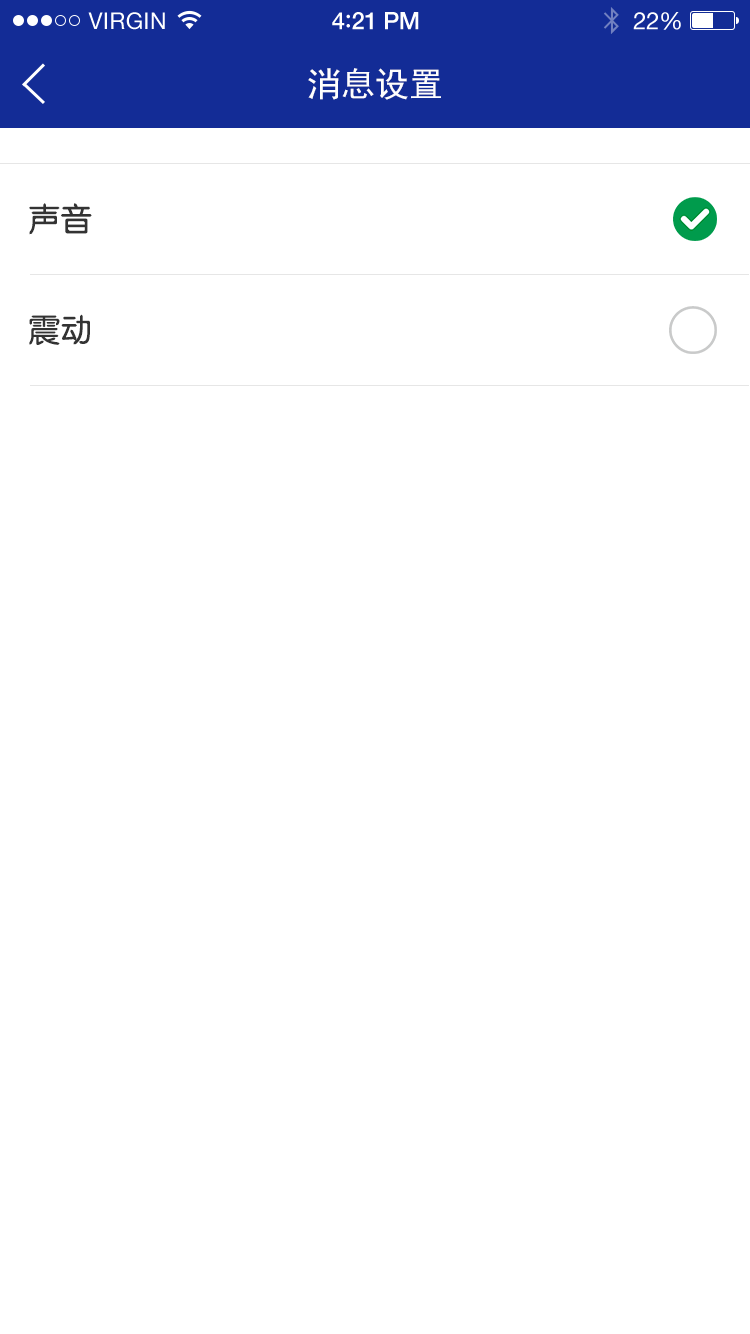
<style>
.page{position:relative;width:750px;height:1334px;background:#ffffff}
.page>*{position:absolute;margin:0}
.t1{font:34px "SimHei";color:#fefefe}
.t2{font:32px/111px "FZY3JW--GB1-0";color:#333333}
</style>
<div class="page">
<p class="t1" style="left:308px;top:68px;width:133px;height:32px">消息设置</p>
<p class="t2" style="left:29px;top:203px;width:63px;height:142px">声音<br>震动</p>
</div>
